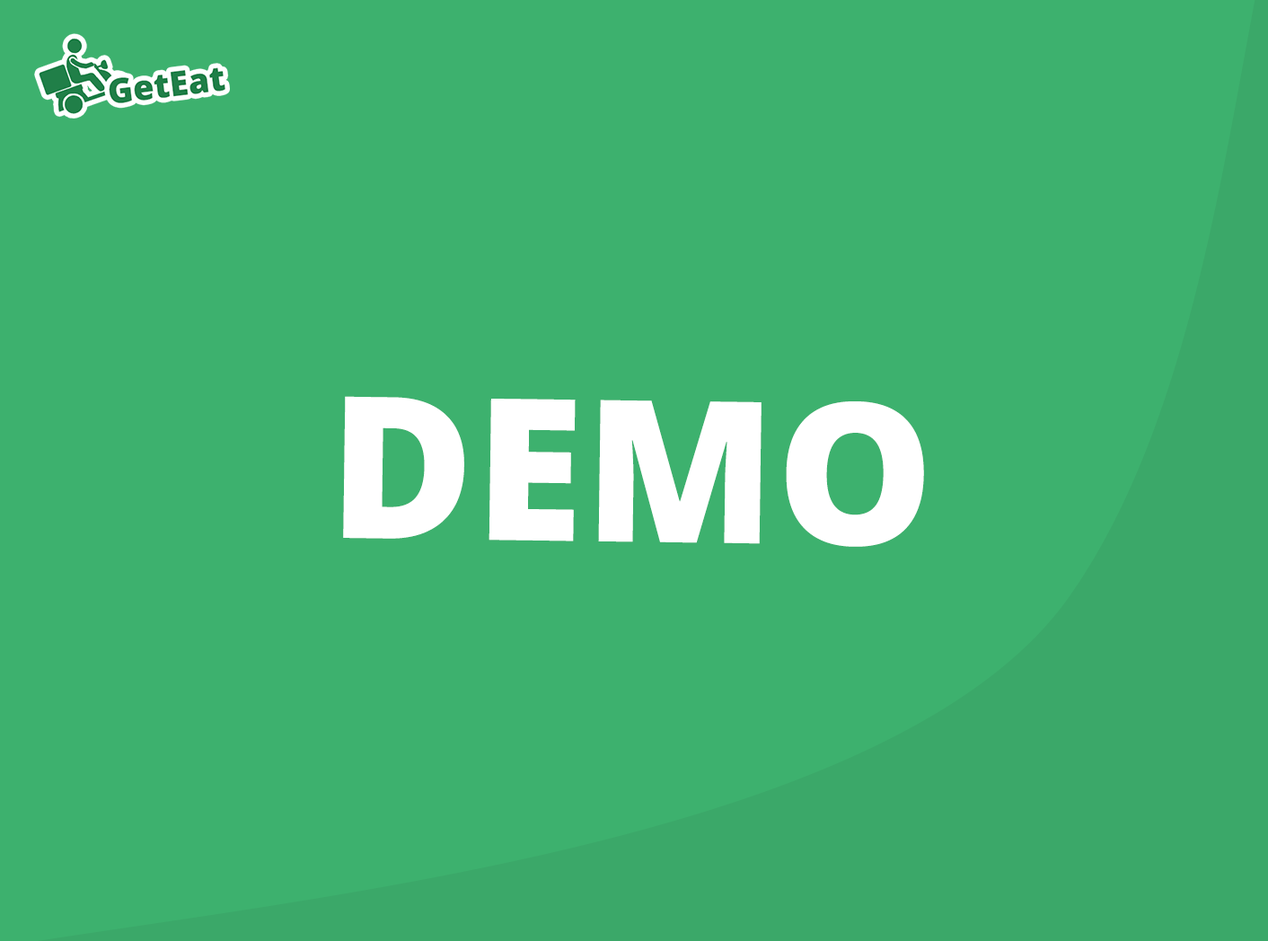
<style>
.page{position:relative;width:1268px;height:941px;background:#3db16e}
.page>*{position:absolute;margin:0}
.t1{font:197.5px "OpenSans-Extrabold";letter-spacing:0.005em;color:#ffffff}
</style>
<div class="page">
<p class="t1" style="left:343px;top:396px;width:581px;height:151px;rotate:1deg">DEMO</p>
</div>
